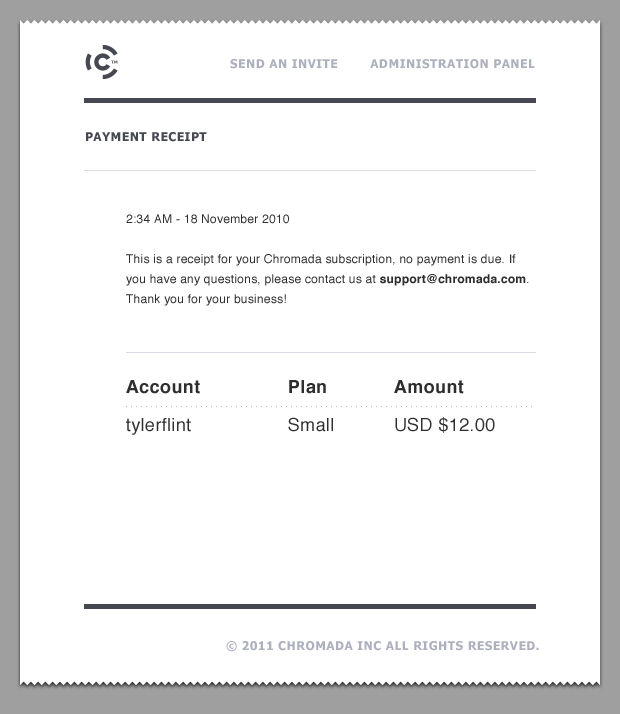
<style>
.page{position:relative;width:620px;height:714px;background:#ffffff}
.page>*{position:absolute;margin:0}
.t1{font:12px "Tahoma-Bold";letter-spacing:0.04em;color:#adb1bd}
.t2{font:12px "Tahoma-Bold";letter-spacing:0.04em;color:#454851}
.t3{font:12px/20px "Helvetica";letter-spacing:0.02em;color:#2e2e2e}
.t4{font:12px/20px "Helvetica-Bold";letter-spacing:0.02em;color:#2e2e2e}
.t5{font:18px/38px "Helvetica";letter-spacing:0.02em;color:#2e2e2e}
.t6{font:18px/38px "Helvetica-Bold";letter-spacing:0.02em;color:#2e2e2e}
</style>
<div class="page">
<p class="t1" style="left:230px;top:59px;width:305px;height:10px">SEND AN INVITE        ADMINISTRATION PANEL</p>
<p class="t2" style="left:86px;top:132px;width:121px;height:10px">PAYMENT RECEIPT</p>
<p class="t3" style="left:126px;top:214px;width:403px;height:92px">2:34 AM - 18 November 2010<br><br>This is a receipt for your Chromada subscription, no payment is due. If you have any questions, please contact us at <span class="t4">support@chromada.com</span>. Thank you for your business!</p>
<p class="t5" style="left:126px;top:380px;width:74px;height:55px"><span class="t6">Account<br></span>tylerflint</p>
<p class="t5" style="left:288px;top:380px;width:45px;height:52px"><span class="t6">Plan<br></span>Small</p>
<p class="t5" style="left:394px;top:380px;width:101px;height:53px"><span class="t6">Amount<br></span>USD $12.00</p>
<p class="t1" style="left:226px;top:641px;width:313px;height:11px">© 2011 CHROMADA INC ALL RIGHTS RESERVED.</p>
</div>
